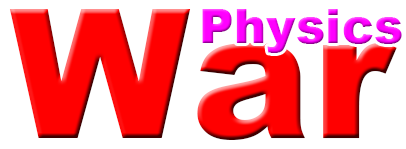
<style>
.page{position:relative;width:406px;height:149px;background:#ffffff}
.page>*{position:absolute;margin:0}
.t1{font:180px "Arial-Black";letter-spacing:0.005em;color:#ff0000}
.t2{font:48px "Arial-Black";letter-spacing:0.005em}
</style>
<div class="page">
<p class="t1" style="left:9px;top:9px;width:388px;height:131px">War</p>
<p class="t2" style="left:202px;top:9px;width:200px;height:44px">Physics</p>
</div>
